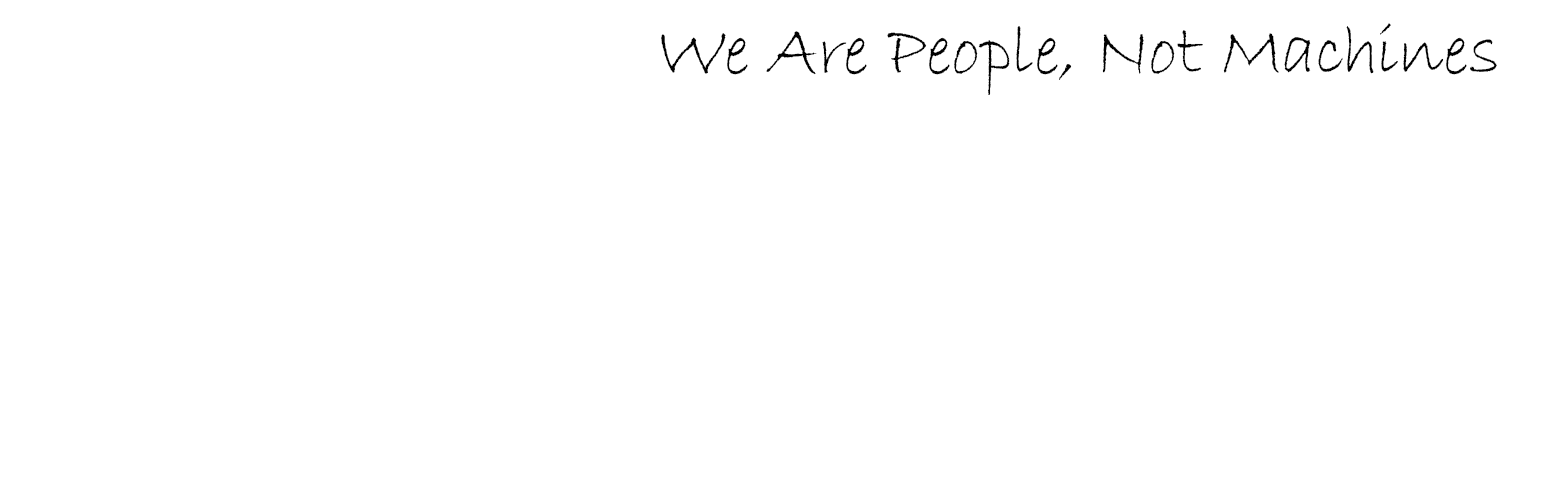
<style>
.page{position:relative;width:1544px;height:500px;background:#ffffff}
.page>*{position:absolute;margin:0}
.t1{font:72px "BradleyHandITC";color:#020202}
</style>
<div class="page">
<p class="t1" style="left:661px;top:23px;width:836px;height:72px">We Are People, Not Machines</p>
</div>
